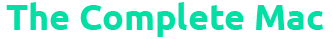
<style>
.page{position:relative;width:333px;height:39px;background:#ffffff}
.page>*{position:absolute;margin:0}
.t1{font:36px "Ubuntu-Bold";color:#01e0a4}
</style>
<div class="page">
<p class="t1" style="left:6px;top:2px;width:317px;height:35px">The Complete Mac</p>
</div>
